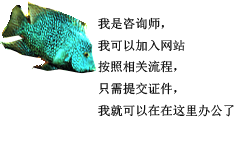
<style>
.page{position:relative;width:240px;height:151px;background:#ffffff}
.page>*{position:absolute;margin:0}
.t1{font:12.5px "SimSun";color:#000000}
</style>
<div class="page">
<p class="t1" style="left:98px;top:17px;width:136px;height:100px">我是咨询师，<br>我可以加入网站<br>按照相关流程，<br>只需提交证件，<br>我就可以在在这里办公了</p>
</div>
